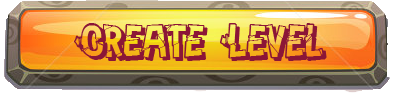
<style>
.page{position:relative;width:393px;height:93px}
.page>*{position:absolute;margin:0}
.t1{font:50px "PeintureFraiche";color:#8b1637}
</style>
<div class="page">
<p class="t1" style="left:74px;top:23px;width:253px;height:38px">Create Level</p>
</div>
